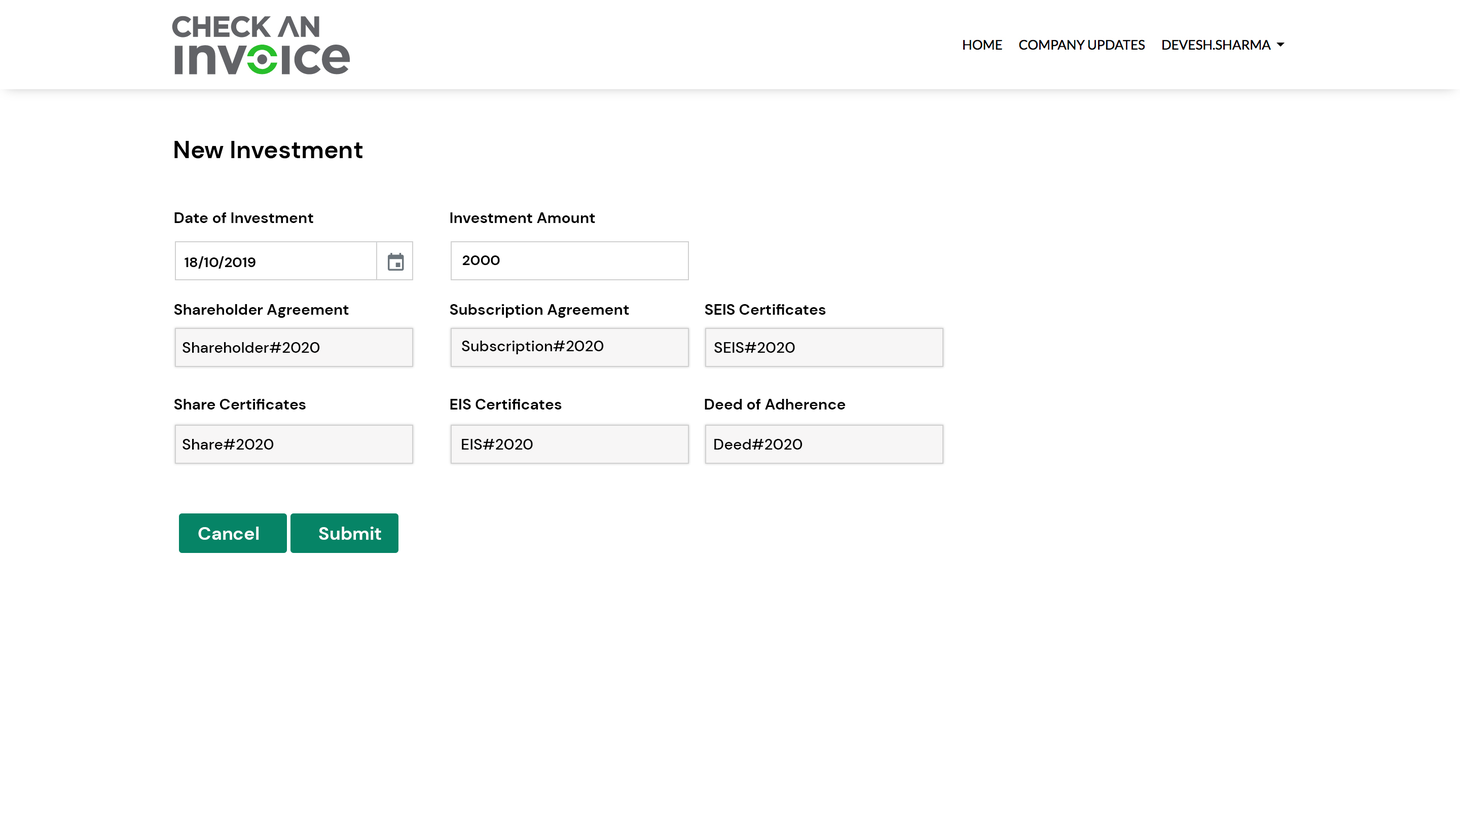
<style>
.page{position:relative;width:1460px;height:816px;background:#ffffff}
.page>*{position:absolute;margin:0}
.t1{font:24.3px "DMSans-Bold";color:#000000}
.t2{font:15.2px "DMSans-Bold";color:#000000}
.t3{font:14.2px "DMSans-Bold";color:#000000}
.t4{font:15.2px "DMSans-Medium";color:#000000}
.t5{font:18.3px "DMSans-Bold";color:#ffffff}
</style>
<div class="page">
<p class="t1" style="left:174px;top:141px;width:189px;height:18px">New Investment</p>
<p class="t2" style="left:174px;top:212px;width:139px;height:11px">Date of Investment</p>
<p class="t2" style="left:450px;top:212px;width:145px;height:11px">Investment Amount</p>
<p class="t3" style="left:185px;top:256px;width:71px;height:13px">18/10/2019</p>
<p class="t3" style="left:462px;top:256px;width:38px;height:9px">2000</p>
<p class="t2" style="left:174px;top:304px;width:175px;height:14px">Shareholder Agreement</p>
<p class="t2" style="left:450px;top:304px;width:179px;height:14px">Subscription Agreement</p>
<p class="t2" style="left:705px;top:304px;width:121px;height:11px">SEIS Certificates</p>
<p class="t4" style="left:462px;top:341px;width:142px;height:13px">Subscription#2020</p>
<p class="t4" style="left:183px;top:342px;width:137px;height:11px">Shareholder#2020</p>
<p class="t4" style="left:715px;top:342px;width:80px;height:11px">SEIS#2020</p>
<p class="t2" style="left:174px;top:399px;width:132px;height:11px">Share Certificates</p>
<p class="t2" style="left:450px;top:399px;width:112px;height:11px">EIS Certificates</p>
<p class="t2" style="left:705px;top:399px;width:141px;height:11px">Deed of Adherence</p>
<p class="t4" style="left:183px;top:439px;width:91px;height:11px">Share#2020</p>
<p class="t4" style="left:462px;top:439px;width:71px;height:11px">EIS#2020</p>
<p class="t4" style="left:715px;top:439px;width:88px;height:11px">Deed#2020</p>
<p class="t5" style="left:198px;top:527px;width:61px;height:13px">Cancel</p>
<p class="t5" style="left:319px;top:527px;width:62px;height:13px">Submit</p>
</div>
